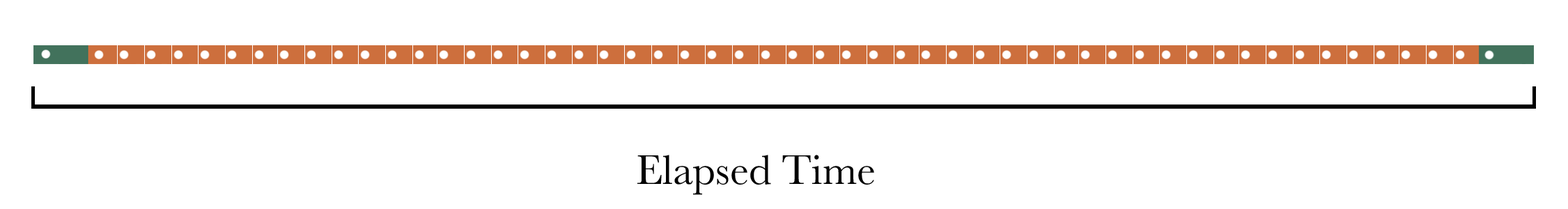
<style>
.page{position:relative;width:1568px;height:209px;background:#ffffff}
.page>*{position:absolute;margin:0}
.t1{font:43px "Baskerville";color:#000000}
</style>
<div class="page">
<p class="t1" style="left:637px;top:155px;width:237px;height:40px">Elapsed Time</p>
</div>
